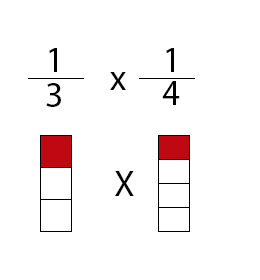
<style>
.page{position:relative;width:260px;height:280px;background:#ffffff}
.page>*{position:absolute;margin:0}
.t1{font:36px "MyriadPro-Regular";color:#000000}
</style>
<div class="page">
<p class="t1" style="left:49px;top:48px;width:8px;height:24px">1</p>
<p class="t1" style="left:166px;top:48px;width:8px;height:24px">1</p>
<p class="t1" style="left:110px;top:72px;width:16px;height:18px">x</p>
<p class="t1" style="left:46px;top:83px;width:15px;height:24px">3</p>
<p class="t1" style="left:162px;top:81px;width:18px;height:24px">4</p>
<p class="t1" style="left:115px;top:171px;width:19px;height:25px">X</p>
</div>
